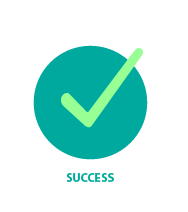
<style>
.page{position:relative;width:188px;height:212px;background:#ffffff}
.page>*{position:absolute;margin:0}
.t1{font:12px "MyriadPro-Bold";color:#00a99d}
</style>
<div class="page">
<p class="t1" style="left:66px;top:173px;width:48px;height:9px">SUCCESS</p>
</div>
